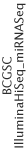
<style>
.page{position:relative;width:27px;height:151px;background:#ffffff}
.page>*{position:absolute;margin:0}
.t1{font:12px "LucidaSans";color:#2d2d2d}
</style>
<div class="page">
<p class="t1" style="left:14px;top:3px;width:12px;height:145px;rotate:-90deg">IlluminaHiSeq_miRNASeq</p>
<p class="t1" style="left:2px;top:57px;width:10px;height:37px;rotate:-90deg">BCGSC</p>
</div>
